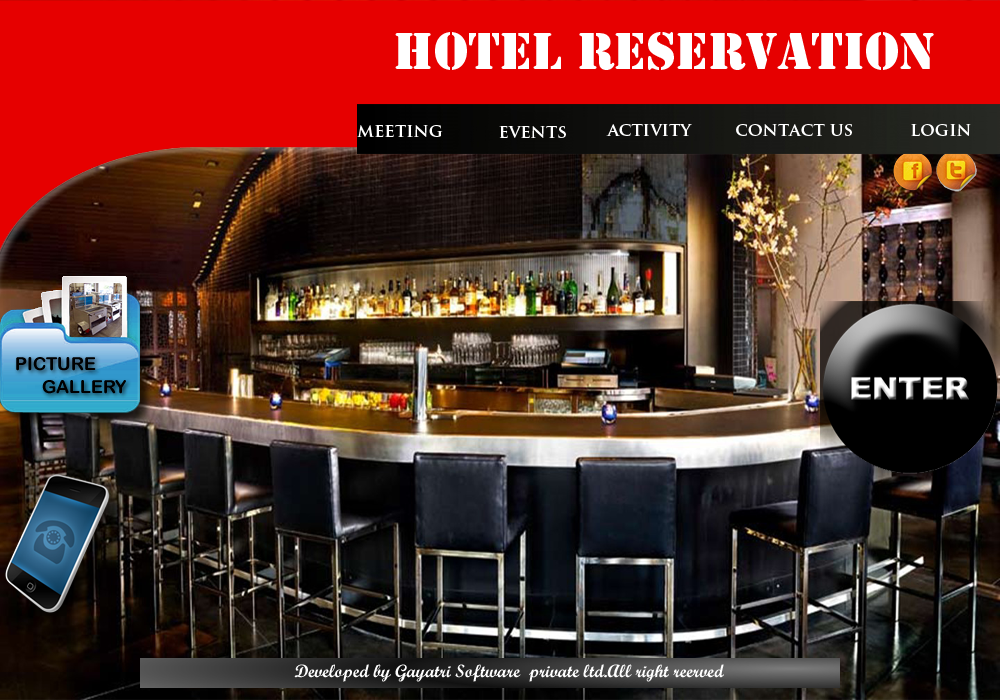
<style>
.page{position:relative;width:1000px;height:700px}
.page>*{position:absolute;margin:0}
.t1{font:48px "StencilStd";color:#ffffff}
.t2{font:18px "TrajanPro-Bold";color:#ffffff}
</style>
<div class="page">
<p class="t1" style="left:395px;top:32px;width:539px;height:38px">hotel reservation</p>
<p class="t2" style="left:357px;top:125px;width:86px;height:12px">meeting</p>
<p class="t2" style="left:499px;top:126px;width:67px;height:12px">events</p>
<p class="t2" style="left:606px;top:124px;width:86px;height:12px">activity</p>
<p class="t2" style="left:736px;top:124px;width:116px;height:12px">contact us</p>
<p class="t2" style="left:911px;top:124px;width:60px;height:12px">login</p>
</div>
